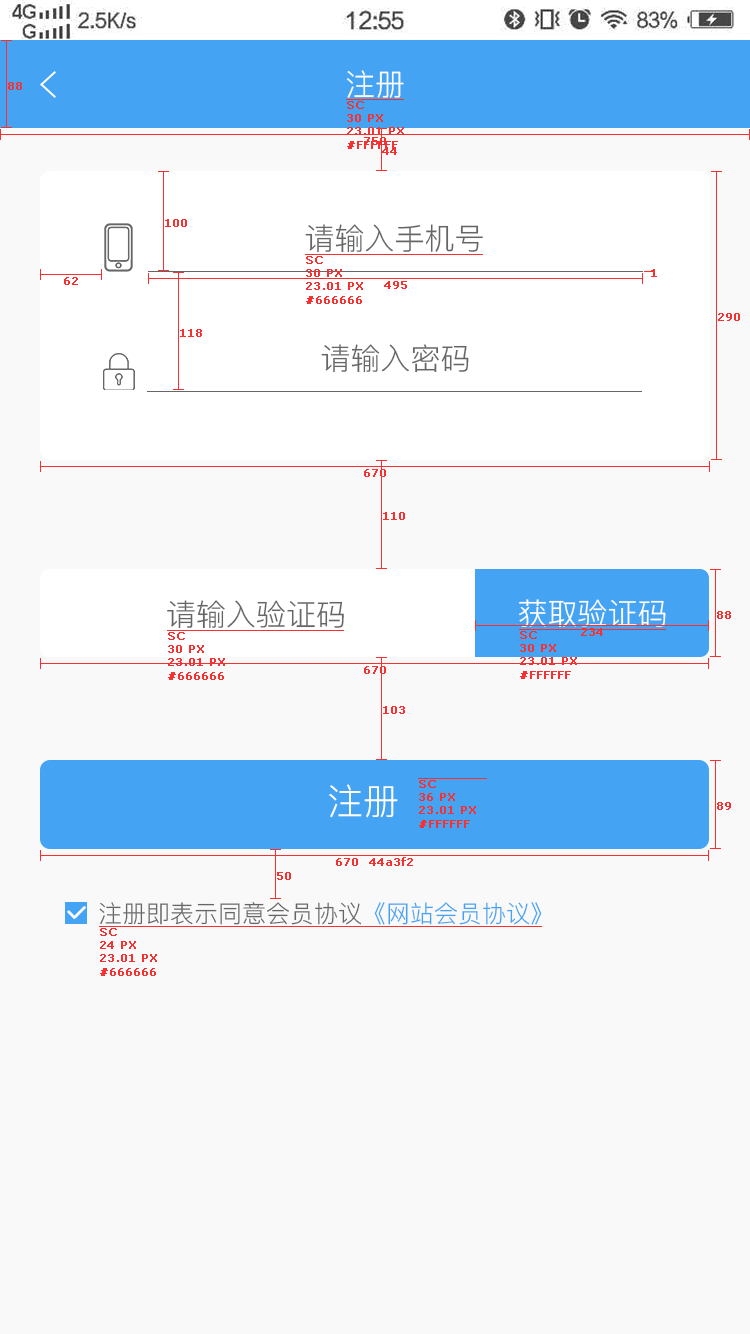
<style>
.page{position:relative;width:750px;height:1334px;background:#f9f9f9}
.page>*{position:absolute;margin:0}
.t1{font:30px "PingFang-SC-Regular";color:#ffffff;text-transform:uppercase}
.t2{font:11px "Verdana";color:#f83030;font-weight:bold}
.t3{font:30px "PingFang-SC-Regular";color:#666666;text-transform:uppercase}
.t4{font:36px "PingFang-SC-Regular";color:#ffffff;text-transform:uppercase}
.t5{font:24px "PingFang-SC-Regular";color:#666666;text-transform:uppercase}
.t6{font:24px "PingFang-SC-Regular";color:#44a3f2;text-transform:uppercase}
</style>
<div class="page">
<p class="t1" style="left:346px;top:70px;width:58px;height:28px">注册</p>
<p class="t2" style="left:8px;top:82px;width:14px;height:8px">88</p>
<p class="t2" style="left:347px;top:101px;width:57px;height:48px">SC<br>30 PX<br>23.01 PX<br>#FFFFFF</p>
<p class="t2" style="left:364px;top:137px;width:22px;height:8px">750</p>
<p class="t2" style="left:382px;top:147px;width:15px;height:8px">44</p>
<p class="t2" style="left:165px;top:219px;width:22px;height:8px">100</p>
<p class="t3" style="left:305px;top:224px;width:178px;height:29px">请输入手机号</p>
<p class="t2" style="left:306px;top:256px;width:57px;height:48px">SC<br>30 PX<br>23.01 PX<br>#666666</p>
<p class="t2" style="left:651px;top:269px;width:6px;height:8px">1</p>
<p class="t2" style="left:64px;top:277px;width:14px;height:8px">62</p>
<p class="t2" style="left:384px;top:281px;width:23px;height:8px">495</p>
<p class="t2" style="left:718px;top:313px;width:22px;height:8px">290</p>
<p class="t2" style="left:180px;top:329px;width:22px;height:8px">118</p>
<p class="t3" style="left:321px;top:344px;width:148px;height:29px">请输入密码</p>
<p class="t2" style="left:364px;top:469px;width:22px;height:8px">670</p>
<p class="t2" style="left:383px;top:512px;width:22px;height:8px">110</p>
<p class="t3" style="left:167px;top:600px;width:177px;height:29px">请输入验证码</p>
<p class="t1" style="left:519px;top:599px;width:147px;height:29px">获取验证码</p>
<p class="t2" style="left:717px;top:611px;width:14px;height:8px">88</p>
<p class="t2" style="left:581px;top:628px;width:22px;height:8px">234</p>
<p class="t2" style="left:168px;top:632px;width:57px;height:48px">SC<br>30 PX<br>23.01 PX<br>#666666</p>
<p class="t2" style="left:520px;top:631px;width:57px;height:48px">SC<br>30 PX<br>23.01 PX<br>#FFFFFF</p>
<p class="t2" style="left:364px;top:666px;width:22px;height:8px">670</p>
<p class="t2" style="left:383px;top:706px;width:22px;height:8px">103</p>
<p class="t4" style="left:329px;top:784px;width:69px;height:34px">注册</p>
<p class="t2" style="left:419px;top:780px;width:57px;height:48px">SC<br>36 PX<br>23.01 PX<br>#FFFFFF</p>
<p class="t2" style="left:717px;top:802px;width:14px;height:8px">89</p>
<p class="t2" style="left:336px;top:857px;width:77px;height:9px">670  44a3f2</p>
<p class="t2" style="left:277px;top:872px;width:14px;height:8px">50</p>
<p class="t5" style="left:99px;top:902px;width:443px;height:23px">注册即表示同意会员协议<span class="t6">《网站会员协议》</span></p>
<p class="t2" style="left:100px;top:928px;width:57px;height:48px">SC<br>24 PX<br>23.01 PX<br>#666666</p>
</div>
